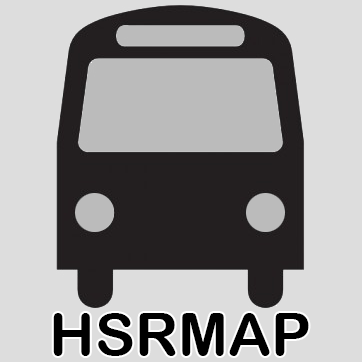
<style>
.page{position:relative;width:362px;height:362px;background:#dddddd}
.page>*{position:absolute;margin:0}
.t1{font:60px "ArialRoundedMTBold";color:#000000}
</style>
<div class="page">
<p class="t1" style="left:53px;top:313px;width:256px;height:43px">HSRMAP</p>
</div>
